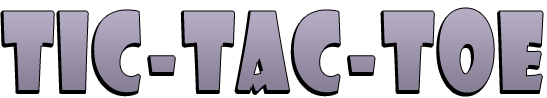
<style>
.page{position:relative;width:547px;height:98px;background:#ffffff}
.page>*{position:absolute;margin:0}
.t1{font:104.5px "ShowcardGothic-Reg";letter-spacing:0.02em;color:#a49ab5;text-transform:uppercase;font-weight:bold;scale:0.78 1}
</style>
<div class="page">
<p class="t1" style="left:1px;top:8px;width:542px;height:88px">tic-tac-toe</p>
</div>
